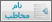
<style>
.page{position:relative;width:52px;height:22px}
.page>*{position:absolute;margin:0}
.t1{font:8px "Tahoma"}
</style>
<div class="page">
<p class="t1" style="left:5px;top:1px;width:25px;height:19px;text-align:center">نام<br>مخاطب</p>
</div>
